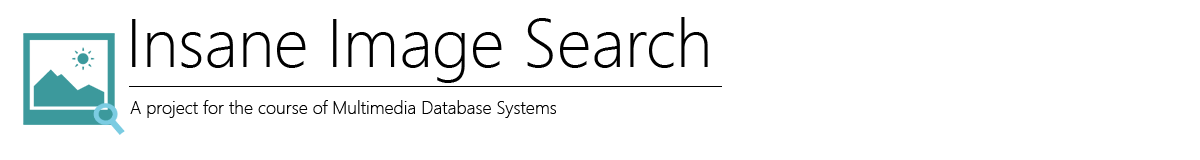
<style>
.page{position:relative;width:1200px;height:160px;background:#ffffff}
.page>*{position:absolute;margin:0}
.t1{font:68px "SegoeUI-Light";color:#000000}
.t2{font:18px "SegoeUI-Light";color:#000000}
</style>
<div class="page">
<p class="t1" style="left:132px;top:17px;width:576px;height:66px">Insane Image Search</p>
<p class="t2" style="left:130px;top:100px;width:426px;height:18px">A project for the course of Multimedia Database Systems</p>
</div>
